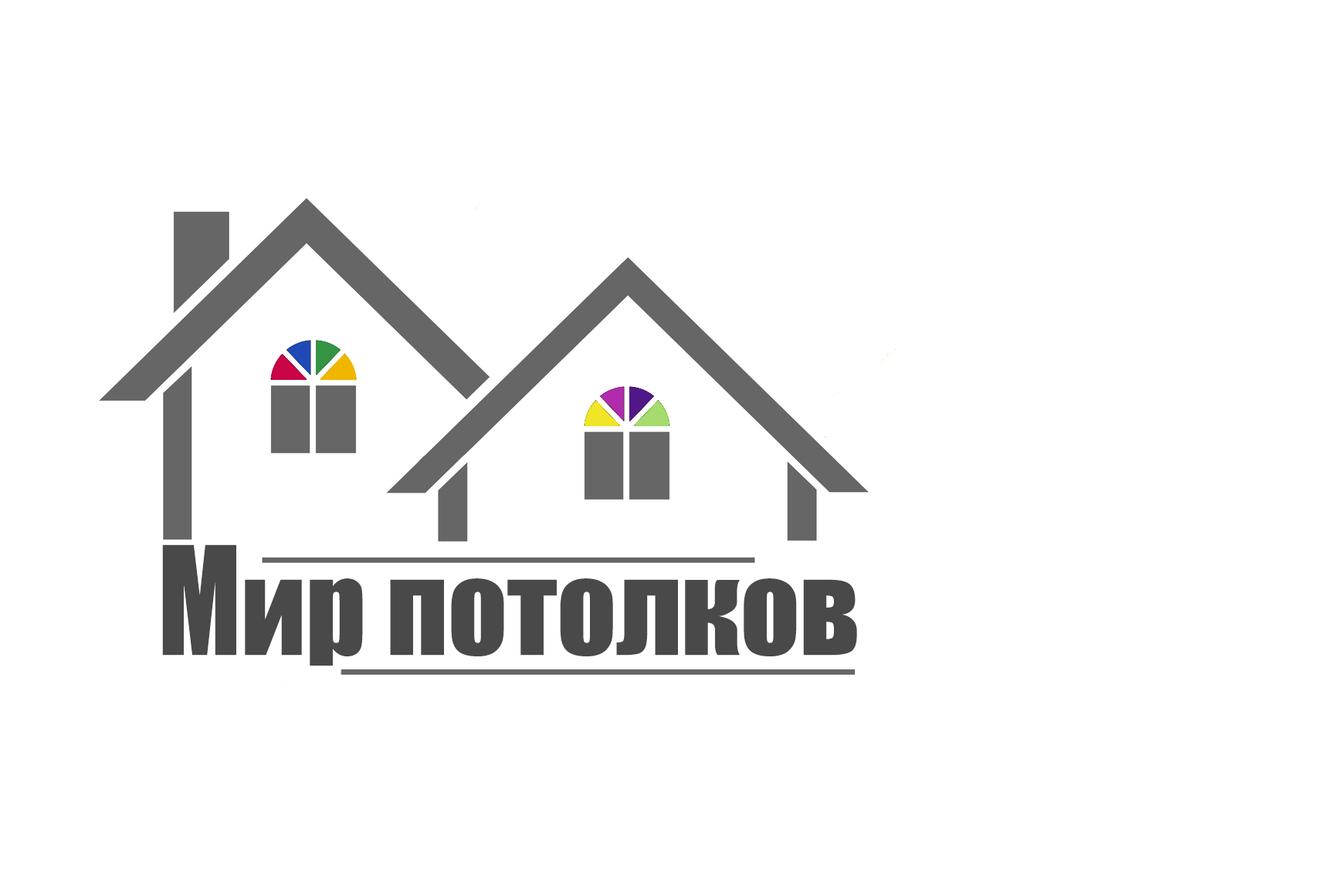
<style>
.page{position:relative;width:1342px;height:888px;background:#ffffff}
.page>*{position:absolute;margin:0}
.t1{font:115.9px "Impact";color:#494949}
.t2{font:139px "Impact";color:#494949;scale:0.83 1}
</style>
<div class="page">
<p class="t1" style="left:162px;top:545px;width:695px;height:121px"><span class="t2">М</span>ир потолков</p>
</div>
